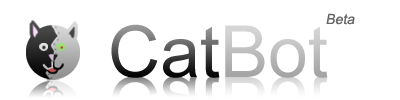
<style>
.page{position:relative;width:400px;height:100px;background:#ffffff}
.page>*{position:absolute;margin:0}
.t1{font:14px "ArialMT";color:#666666;font-style:italic}
.t2{font:72px "ArialMT"}
.t3{font:72px "ArialMT";color:#cccccc}
</style>
<div class="page">
<p class="t1" style="left:326px;top:13px;width:29px;height:12px">Beta</p>
<p class="t2" style="left:111px;top:24px;width:109px;height:54px">Cat</p>
<p class="t3" style="left:225px;top:25px;width:103px;height:53px">Bot</p>
</div>
